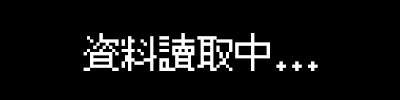
<style>
.page{position:relative;width:400px;height:100px;background:#000000}
.page>*{position:absolute;margin:0}
.t1{font:60px "Silver";color:#ffffff}
</style>
<div class="page">
<p class="t1" style="left:83px;top:33px;width:235px;height:38px">資料讀取中...</p>
</div>
